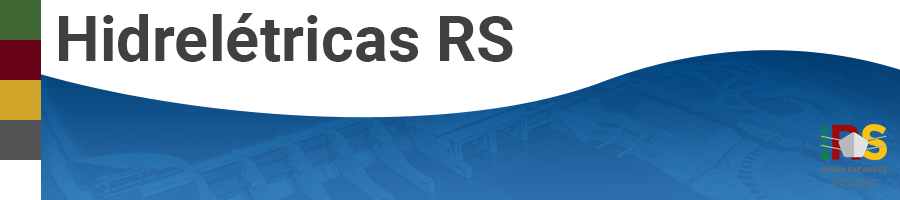
<style>
.page{position:relative;width:900px;height:200px;background:#ffffff}
.page>*{position:absolute;margin:0}
.t1{font:63px "Roboto-Bold";color:#404040}
</style>
<div class="page">
<p class="t1" style="left:59px;top:13px;width:454px;height:49px">Hidrelétricas RS</p>
</div>
